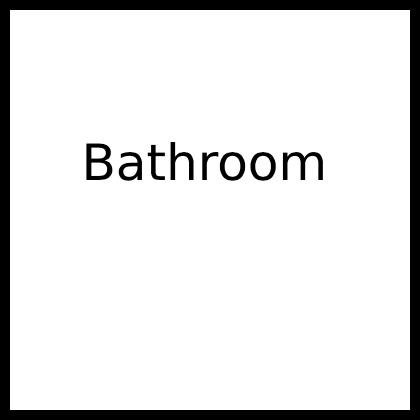
<style>
.page{position:relative;width:420px;height:420px;background:#ffffff}
.page>*{position:absolute;margin:0}
.t1{font:50px "DejaVuSans";color:#000000}
</style>
<div class="page">
<p class="t1" style="left:86px;top:142px;width:237px;height:39px">Bathroom</p>
</div>
